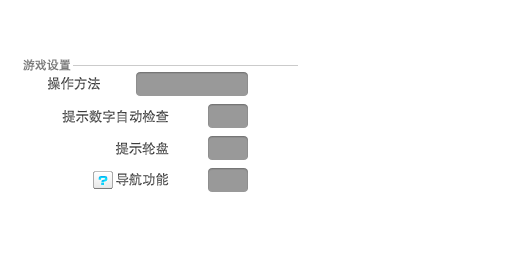
<style>
.page{position:relative;width:512px;height:256px;background:#ffffff}
.page>*{position:absolute;margin:0}
.t1{font:12px "DFPHeiW5-GB";color:#797979}
.t2{font:13.3px "DFPHeiW5-GB"}
.t3{font:13.3px "DFPHeiW5-GB";color:#797979}
</style>
<div class="page">
<p class="t1" style="left:23px;top:59px;width:48px;height:12px">游戏设置</p>
<p class="t2" style="left:48px;top:77px;width:52px;height:13px">操作方法</p>
<p class="t2" style="left:62px;top:110px;width:107px;height:13px">提示数字自动检查</p>
<p class="t2" style="left:116px;top:142px;width:53px;height:13px">提示轮盘</p>
<p class="t3" style="left:116px;top:173px;width:53px;height:13px">导航功能</p>
</div>
